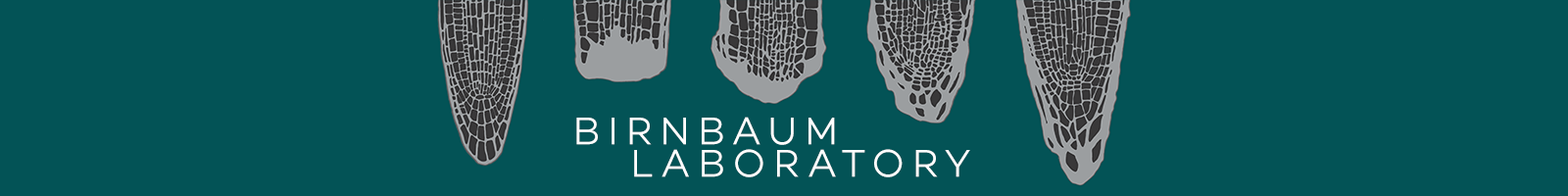
<style>
.page{position:relative;width:1568px;height:196px;background:#035356}
.page>*{position:absolute;margin:0}
.t1{font:39.2px "Campton-LightDEMO";letter-spacing:0.2em;color:#ffffff}
</style>
<div class="page">
<p class="t1" style="left:576px;top:117px;width:259px;height:28px">BIRNBAUM</p>
<p class="t1" style="left:634px;top:149px;width:336px;height:28px">LABORATORY</p>
</div>
